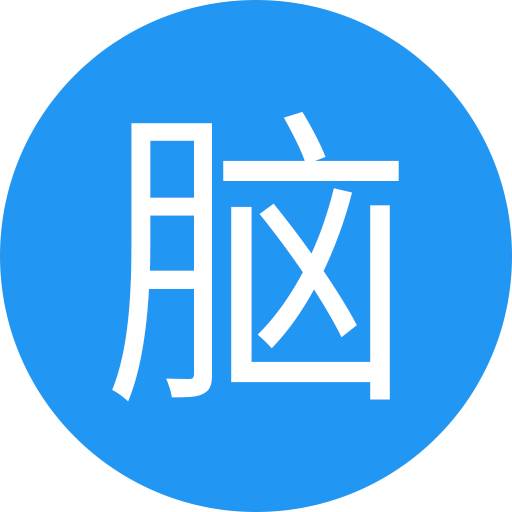
<style>
.page{position:relative;width:512px;height:512px;background:#2196f3}
.page>*{position:absolute;margin:0}
.t1{font:316px "SourceHanSansCN-Normal";letter-spacing:0.01em;color:#ffffff}
</style>
<div class="page">
<p class="t1" style="left:112px;top:112px;width:287px;height:290px">脑</p>
</div>
